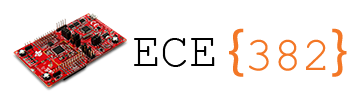
<style>
.page{position:relative;width:360px;height:101px;background:#ffffff}
.page>*{position:absolute;margin:0}
.t1{font:48px "CourierNewPSMT";color:#f37726}
.t2{font:60px "MyriadPro-Regular";color:#f37726}
.t3{font:48px "CourierNewPSMT";color:#000000}
</style>
<div class="page">
<p class="t1" style="left:229px;top:28px;width:118px;height:49px"><span class="t2">{</span>382<span class="t2">}</span></p>
<p class="t3" style="left:134px;top:38px;width:81px;height:29px">ECE</p>
</div>
